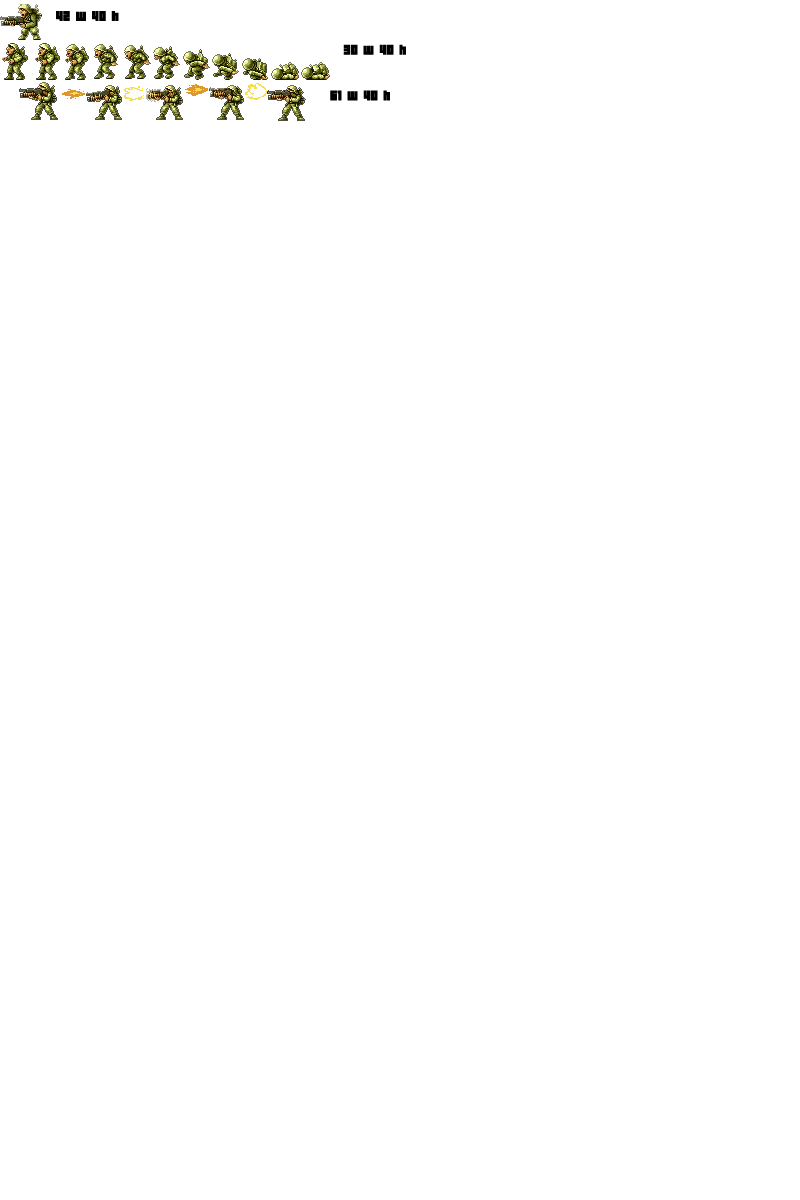
<style>
.page{position:relative;width:800px;height:1200px;background:#ffffff}
.page>*{position:absolute;margin:0}
.t1{font:12px "04b19";color:#000000;font-weight:bold}
</style>
<div class="page">
<p class="t1" style="left:56px;top:11px;width:63px;height:10px">42 w 40 h</p>
<p class="t1" style="left:343px;top:44px;width:63px;height:11px">30 w 40 h</p>
<p class="t1" style="left:330px;top:90px;width:60px;height:11px">61 w 40 h</p>
</div>
